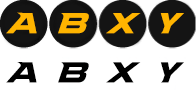
<style>
.page{position:relative;width:196px;height:97px;background:#ffffff}
.page>*{position:absolute;margin:0}
.t1{font:29.2px "NCAAArmyBlackKnight";color:#ffb400}
.t2{font:29.2px "NCAAArmyBlackKnight";color:#000000}
</style>
<div class="page">
<p class="t1" style="left:6px;top:12px;width:31px;height:22px">A</p>
<p class="t1" style="left:58px;top:13px;width:31px;height:21px">B</p>
<p class="t1" style="left:106px;top:13px;width:35px;height:21px">X</p>
<p class="t1" style="left:160px;top:13px;width:24px;height:21px">Y</p>
<p class="t2" style="left:6px;top:62px;width:31px;height:21px">A</p>
<p class="t2" style="left:58px;top:62px;width:31px;height:21px">B</p>
<p class="t2" style="left:106px;top:62px;width:35px;height:21px">X</p>
<p class="t2" style="left:160px;top:62px;width:24px;height:21px">Y</p>
</div>
